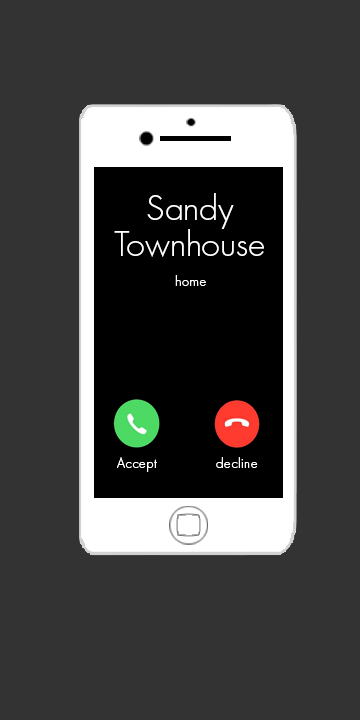
<style>
.page{position:relative;width:360px;height:720px;background:#333333}
.page>*{position:absolute;margin:0}
.t1{font:37px/36px "FuturaPT-Light";letter-spacing:-0.01em;color:#ffffff}
.t2{font:15px "FuturaPT-Light";letter-spacing:0.01em;color:#ffffff}
</style>
<div class="page">
<p class="t1" style="left:114px;top:193px;width:150px;height:64px;text-align:center">Sandy<br>Townhouse</p>
<p class="t2" style="left:175px;top:275px;width:31px;height:11px">home</p>
<p class="t2" style="left:117px;top:457px;width:40px;height:15px">Accept</p>
<p class="t2" style="left:216px;top:457px;width:42px;height:11px">decline</p>
</div>
